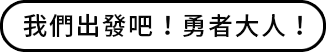
<style>
.page{position:relative;width:326px;height:52px;background:#ffffff}
.page>*{position:absolute;margin:0}
.t1{font:25px "NotoSansCJKtc-Medium";letter-spacing:0.06em;color:#060606}
</style>
<div class="page">
<p class="t1" style="left:23px;top:13px;width:279px;height:25px">我們出發吧！勇者大人！</p>
</div>
